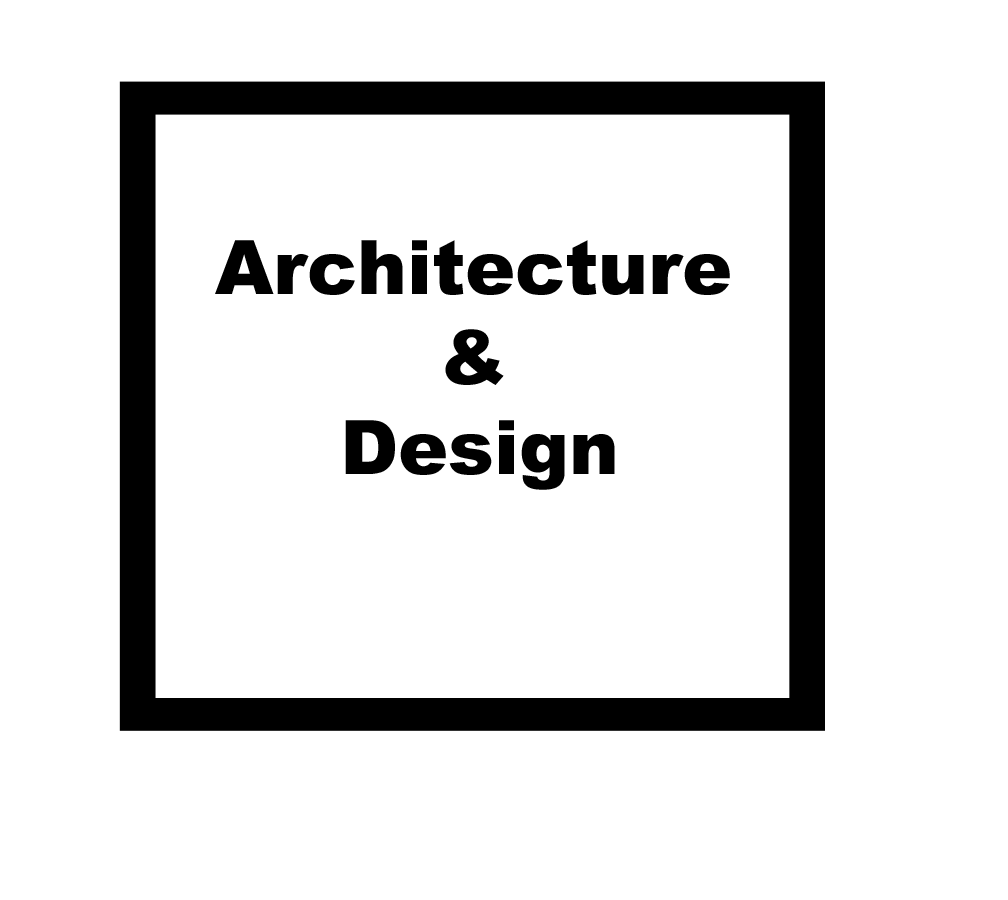
<style>
.page{position:relative;width:1008px;height:900px;background:#ffffff}
.page>*{position:absolute;margin:0}
.t1{font:75px "Arial-Black";color:#000000}
</style>
<div class="page">
<p class="t1" style="left:215px;top:240px;width:515px;height:250px">Architecture<br>         &amp;<br>     Design</p>
</div>
